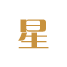
<style>
.page{position:relative;width:67px;height:67px;background:#ffffff}
.page>*{position:absolute;margin:0}
.t1{font:32.2px "FZCQJW--GB1-0";letter-spacing:0.05em;color:#c8923e}
</style>
<div class="page">
<p class="t1" style="left:18px;top:19px;width:31px;height:30px">星</p>
</div>
